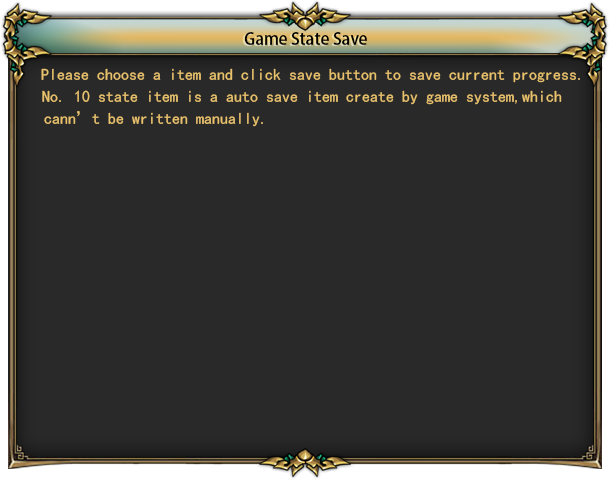
<style>
.page{position:relative;width:610px;height:480px;background:#292929}
.page>*{position:absolute;margin:0}
.t1{font:16.6px "AdobeHeitiStd-Regular";color:#000000}
.t2{font:16px "SimHei";color:#e9c26d}
</style>
<div class="page">
<p class="t1" style="left:244px;top:32px;width:123px;height:13px">Game State Save</p>
<p class="t2" style="left:41px;top:68px;width:539px;height:15px">Please choose a item and click save button to save current progress.</p>
<p class="t2" style="left:42px;top:90px;width:520px;height:15px">No. 10 state item is a auto save item create by game system,which</p>
<p class="t2" style="left:44px;top:111px;width:219px;height:16px">cann’t be written manually.</p>
</div>
